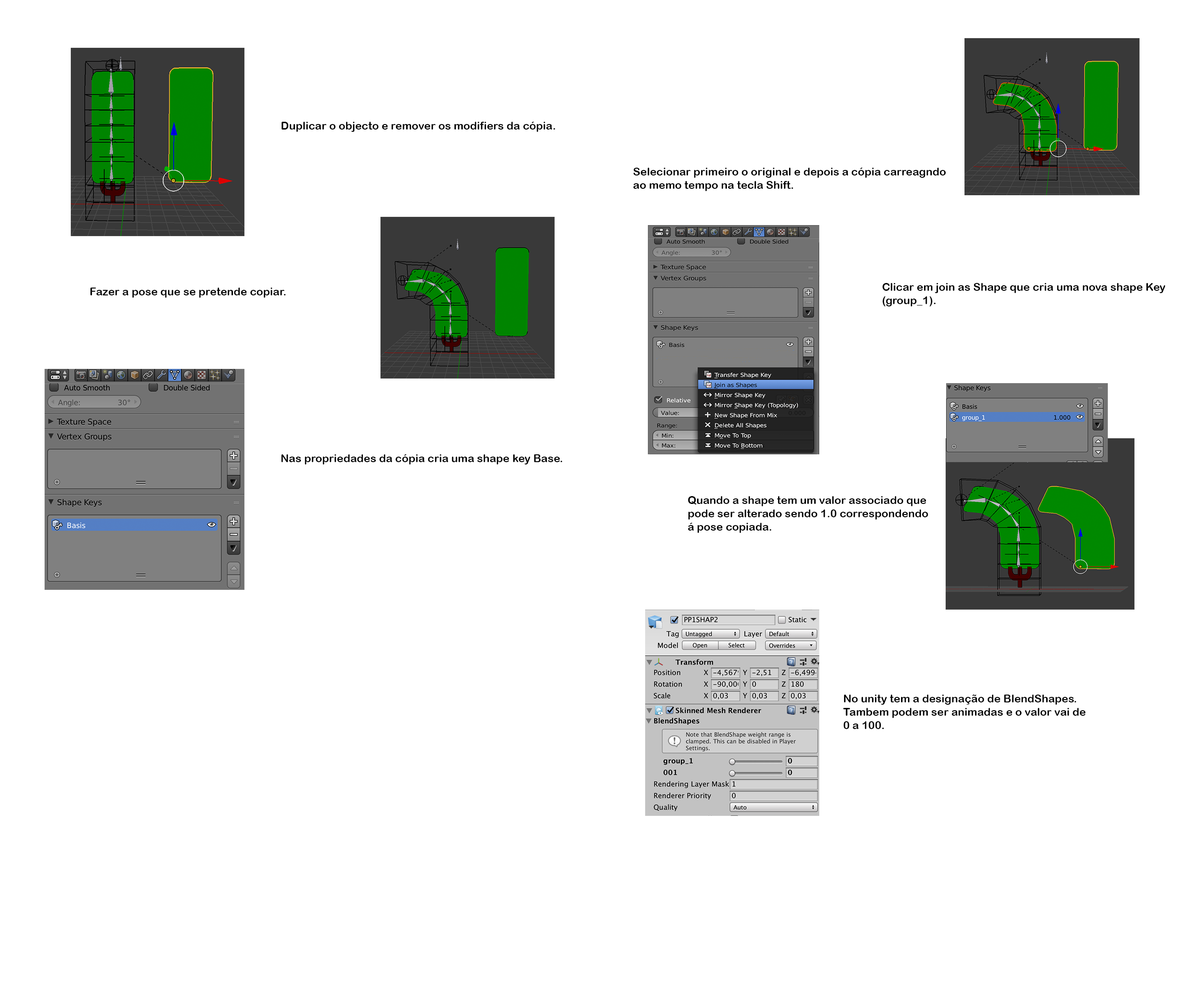
<style>
.page{position:relative;width:1191px;height:1001px;background:#ffffff}
.page>*{position:absolute;margin:0}
.t1{font:11px "ArialRoundedMTBold";color:#000000}
</style>
<div class="page">
<p class="t1" style="left:281px;top:122px;width:274px;height:10px">Duplicar o objecto e remover os modifiers da cópia.</p>
<p class="t1" style="left:633px;top:168px;width:313px;height:23px">Selecionar primeiro o original e depois a cópia carreagndo<br>ao memo tempo na tecla Shift.</p>
<p class="t1" style="left:90px;top:288px;width:196px;height:10px">Fazer a pose que se pretende copiar.</p>
<p class="t1" style="left:882px;top:283px;width:283px;height:23px">Clicar em join as Shape que cria uma nova shape Key <br>(group_1).</p>
<p class="t1" style="left:281px;top:454px;width:281px;height:11px">Nas propriedades da cópia cria uma shape key Base.</p>
<p class="t1" style="left:688px;top:496px;width:240px;height:37px">Quando a shape tem um valor associado que<br>pode ser alterado sendo 1.0 correspondendo<br>á pose copiada.</p>
<p class="t1" style="left:843px;top:694px;width:243px;height:35px">No unity tem a designação de BlendShapes.<br>Tambem podem ser animadas e o valor vai de<br>0 a 100.</p>
</div>
